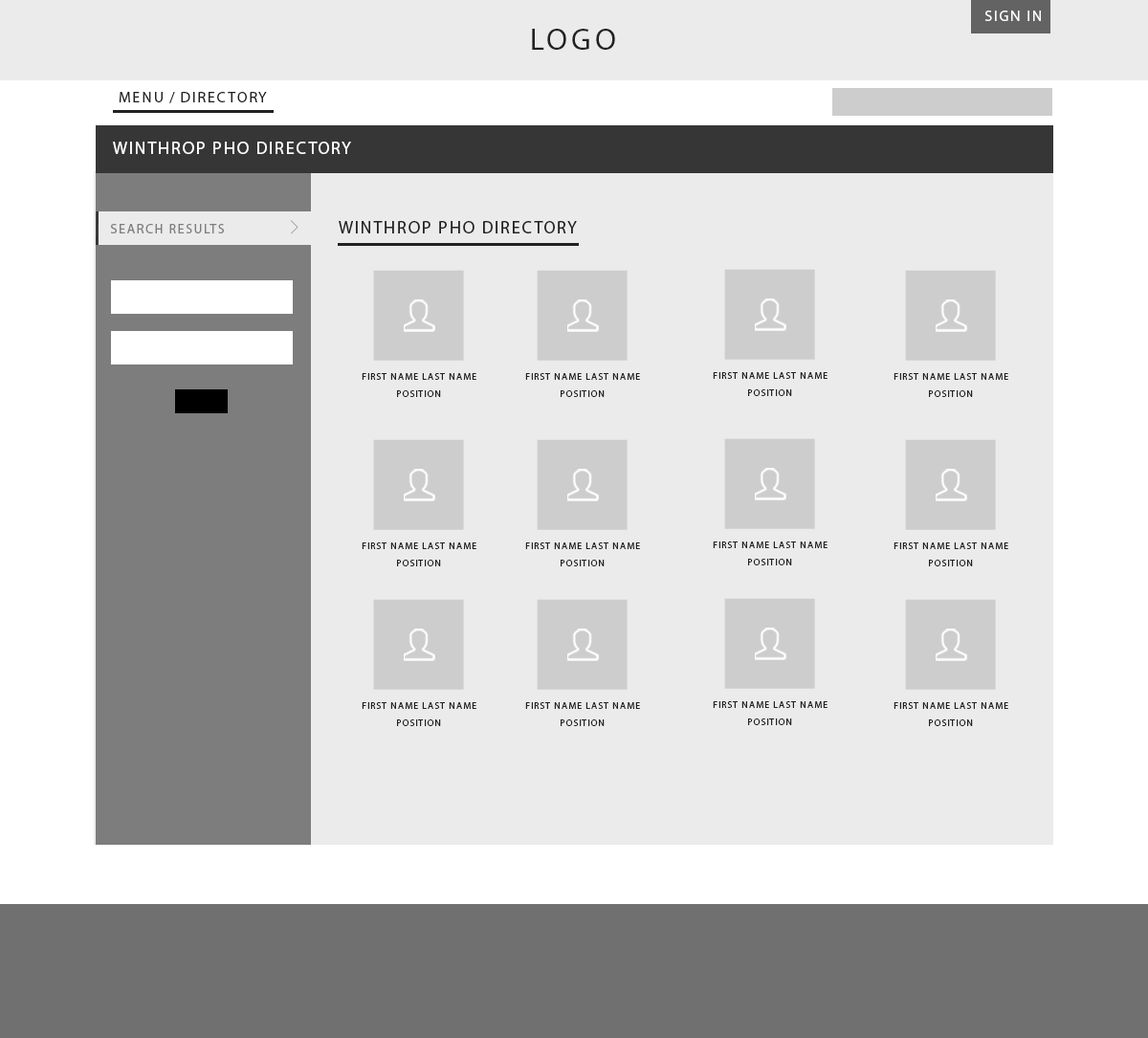
<style>
.page{position:relative;width:1148px;height:1038px;background:#ebebeb}
.page>*{position:absolute;margin:0}
.t1{font:15.3px "MyriadPro-Regular";letter-spacing:0.1em;color:#ffffff;text-transform:uppercase}
.t2{font:30.6px "MyriadPro-Regular";letter-spacing:0.12em;color:#222222;text-transform:uppercase}
.t3{font:15.3px "MyriadPro-Regular";letter-spacing:0.1em;color:#222222;text-transform:uppercase}
.t4{font:17.2px "MyriadPro-Regular";letter-spacing:0.1em;color:#ffffff}
.t5{font:17.2px "MyriadPro-Regular";letter-spacing:0.1em;color:#222222;text-transform:uppercase}
.t6{font:13.4px "MyriadPro-Regular";letter-spacing:0.1em;color:#7d7d7d;text-transform:uppercase}
.t7{font:9.6px/17.2px "MyriadPro-Regular";letter-spacing:0.1em;color:#222222}
</style>
<div class="page">
<p class="t1" style="left:985px;top:11px;width:56px;height:10px">Sign in</p>
<p class="t2" style="left:532px;top:29px;width:83px;height:21px">LOGO</p>
<p class="t3" style="left:119px;top:92px;width:148px;height:11px">MENU / Directory</p>
<p class="t4" style="left:113px;top:142px;width:238px;height:12px">WINTHROP PHO DIRECTORY</p>
<p class="t5" style="left:339px;top:221px;width:238px;height:13px">wiNTHROP PHO DIRECTORY</p>
<p class="t6" style="left:110px;top:224px;width:114px;height:10px">sEARCH rESULTS</p>
<p class="t7" style="left:362px;top:373px;width:115px;height:24px;text-align:center">FIRST NAME LAST NAME<br>POSITION</p>
<p class="t7" style="left:525px;top:373px;width:115px;height:24px;text-align:center">FIRST NAME LAST NAME<br>POSITION</p>
<p class="t7" style="left:713px;top:372px;width:115px;height:24px;text-align:center">FIRST NAME LAST NAME<br>POSITION</p>
<p class="t7" style="left:894px;top:373px;width:115px;height:24px;text-align:center">FIRST NAME LAST NAME<br>POSITION</p>
<p class="t7" style="left:362px;top:543px;width:115px;height:24px;text-align:center">FIRST NAME LAST NAME<br>POSITION</p>
<p class="t7" style="left:525px;top:543px;width:115px;height:24px;text-align:center">FIRST NAME LAST NAME<br>POSITION</p>
<p class="t7" style="left:713px;top:542px;width:115px;height:24px;text-align:center">FIRST NAME LAST NAME<br>POSITION</p>
<p class="t7" style="left:894px;top:543px;width:115px;height:24px;text-align:center">FIRST NAME LAST NAME<br>POSITION</p>
<p class="t7" style="left:713px;top:701px;width:115px;height:24px;text-align:center">FIRST NAME LAST NAME<br>POSITION</p>
<p class="t7" style="left:362px;top:702px;width:115px;height:24px;text-align:center">FIRST NAME LAST NAME<br>POSITION</p>
<p class="t7" style="left:525px;top:702px;width:115px;height:24px;text-align:center">FIRST NAME LAST NAME<br>POSITION</p>
<p class="t7" style="left:894px;top:702px;width:115px;height:24px;text-align:center">FIRST NAME LAST NAME<br>POSITION</p>
</div>
